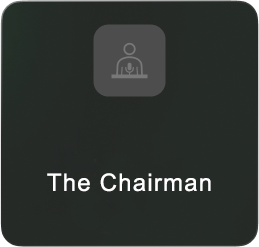
<style>
.page{position:relative;width:259px;height:247px}
.page>*{position:absolute;margin:0}
.t1{font:24px "ArialMT";letter-spacing:0.05em;color:#ffffff}
</style>
<div class="page">
<p class="t1" style="left:47px;top:173px;width:164px;height:19px">The Chairman</p>
</div>
